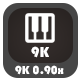
<style>
.page{position:relative;width:80px;height:80px;background:#464646}
.page>*{position:absolute;margin:0}
.t1{font:15px "Bauhaus93";color:#ffffff}
.t2{font:12px "Bauhaus93";color:#ffffff}
</style>
<div class="page">
<p class="t1" style="left:31px;top:46px;width:18px;height:12px">9K</p>
<p class="t2" style="left:15px;top:65px;width:49px;height:10px">9K 0.90x</p>
</div>
